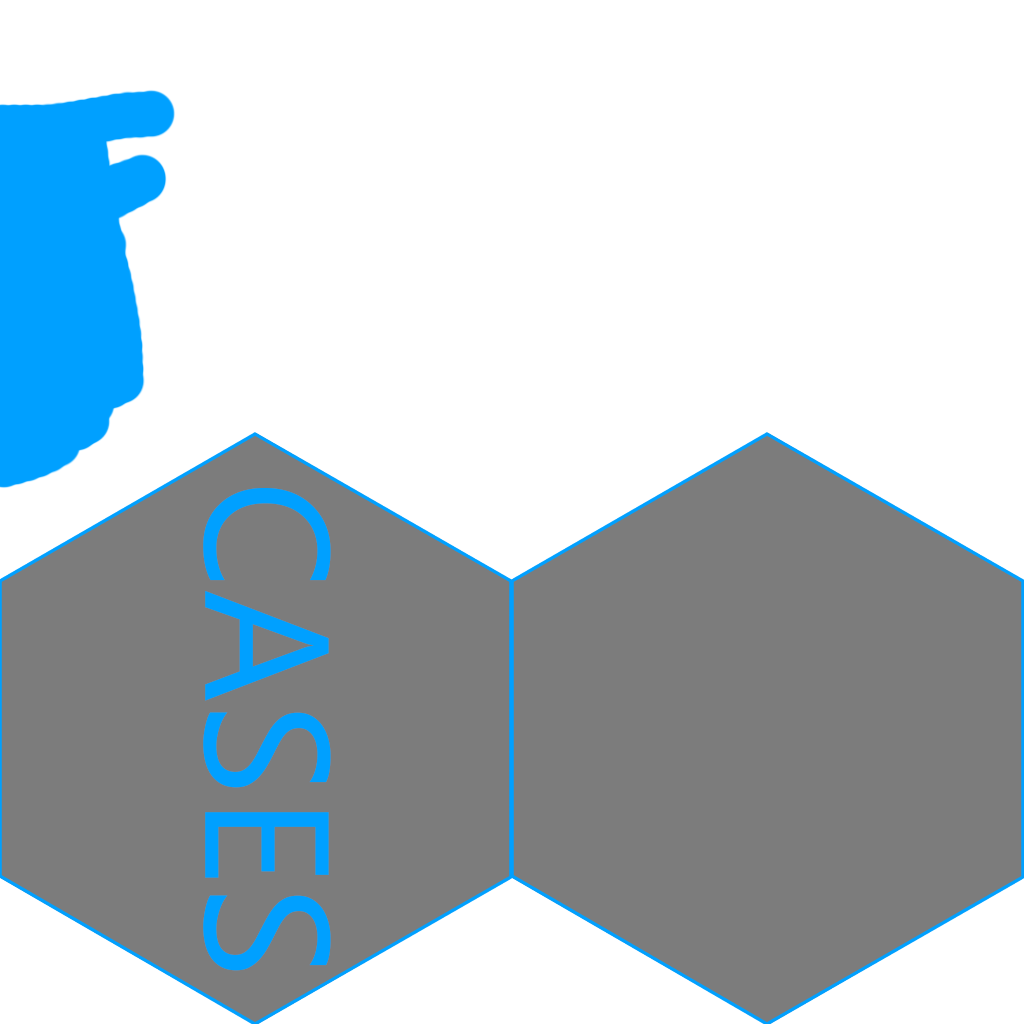
<style>
.page{position:relative;width:1024px;height:1024px;background:#ffffff}
.page>*{position:absolute;margin:0}
.t1{font:176px "SegoeUI";color:#00a0ff}
.t2{font:176px "SegoeUI";color:#ffffff}
</style>
<div class="page">
<p class="t1" style="left:203px;top:488px;width:128px;height:483px;rotate:90deg"><span class="t2"><br><br><br><br><br><br><br><br><br><br><br><br><br><br><br><br></span>CASES</p>
</div>
